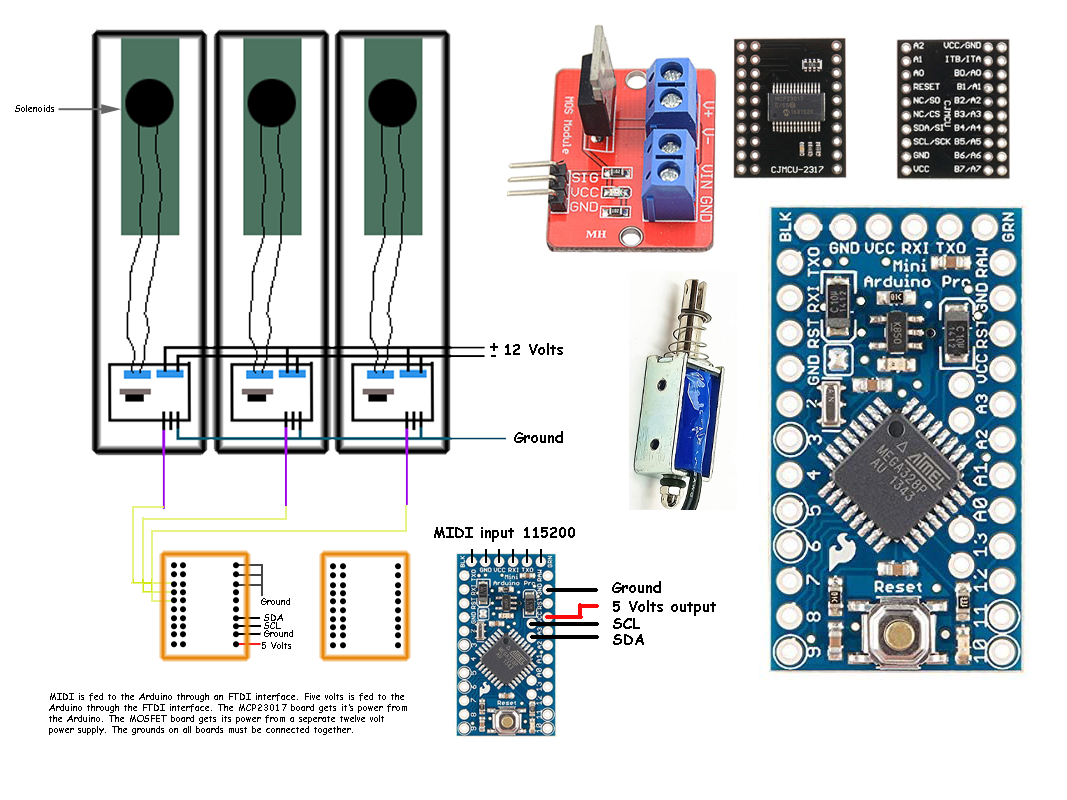
<style>
.page{position:relative;width:1067px;height:800px;background:#ffffff}
.page>*{position:absolute;margin:0}
.t1{font:9.4px "ComicSansMS-Bold";color:#000000}
.t2{font:14.6px "ComicSansMS-Bold";color:#000000}
</style>
<div class="page">
<p class="t1" style="left:15px;top:105px;width:39px;height:7px">Solenoids</p>
<p class="t2" style="left:490px;top:343px;width:8px;height:8px">+</p>
<p class="t2" style="left:505px;top:343px;width:58px;height:12px">12 Volts</p>
<p class="t2" style="left:514px;top:431px;width:49px;height:12px">Ground</p>
<p class="t2" style="left:434px;top:527px;width:141px;height:15px">MIDI input 115200</p>
<p class="t2" style="left:612px;top:581px;width:49px;height:12px">Ground</p>
<p class="t1" style="left:261px;top:598px;width:29px;height:7px">Ground</p>
<p class="t2" style="left:613px;top:600px;width:103px;height:16px">5 Volts output</p>
<p class="t1" style="left:264px;top:614px;width:19px;height:7px">SDA</p>
<p class="t1" style="left:264px;top:622px;width:17px;height:7px">SCL</p>
<p class="t1" style="left:264px;top:630px;width:29px;height:7px">Ground</p>
<p class="t2" style="left:613px;top:618px;width:27px;height:11px">SCL</p>
<p class="t2" style="left:613px;top:634px;width:31px;height:11px">SDA</p>
<p class="t1" style="left:262px;top:642px;width:29px;height:7px">5 Volts</p>
<p class="t1" style="left:49px;top:693px;width:358px;height:42px">MIDI is fed to the Arduino through an FTDI interface. Five volts is fed to the<br>Arduino through the FTDI interface. The MCP23017 board gets it’s power from<br>the Arduino. The MOSFET board gets its power from a seperate twelve volt<br>power supply. The grounds on all boards must be connected together.</p>
</div>
